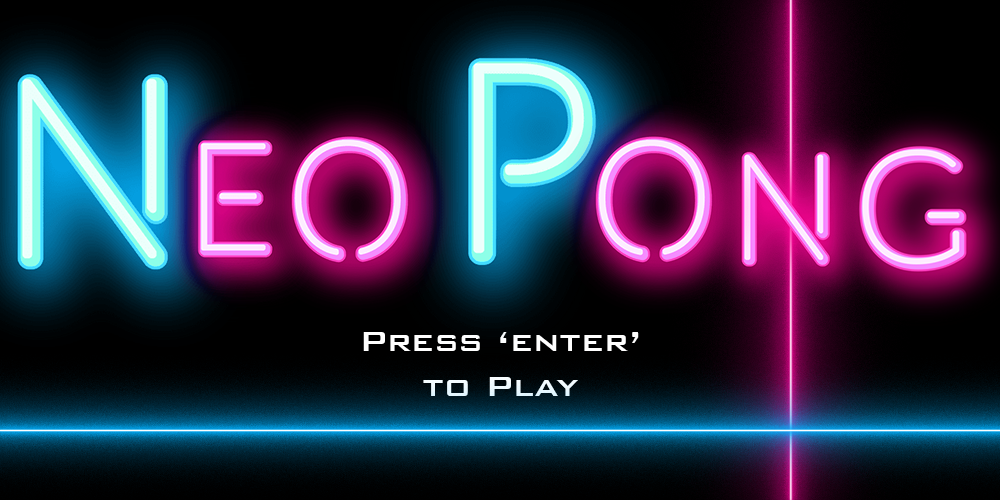
<style>
.page{position:relative;width:1000px;height:500px}
.page>*{position:absolute;margin:0}
.t1{font:37.5px "BankGothicBT-Medium";color:#ffffff}
</style>
<div class="page">
<p class="t1" style="left:363px;top:332px;width:276px;height:64px;text-align:center">Press ‘enter’ <br>to Play</p>
</div>
